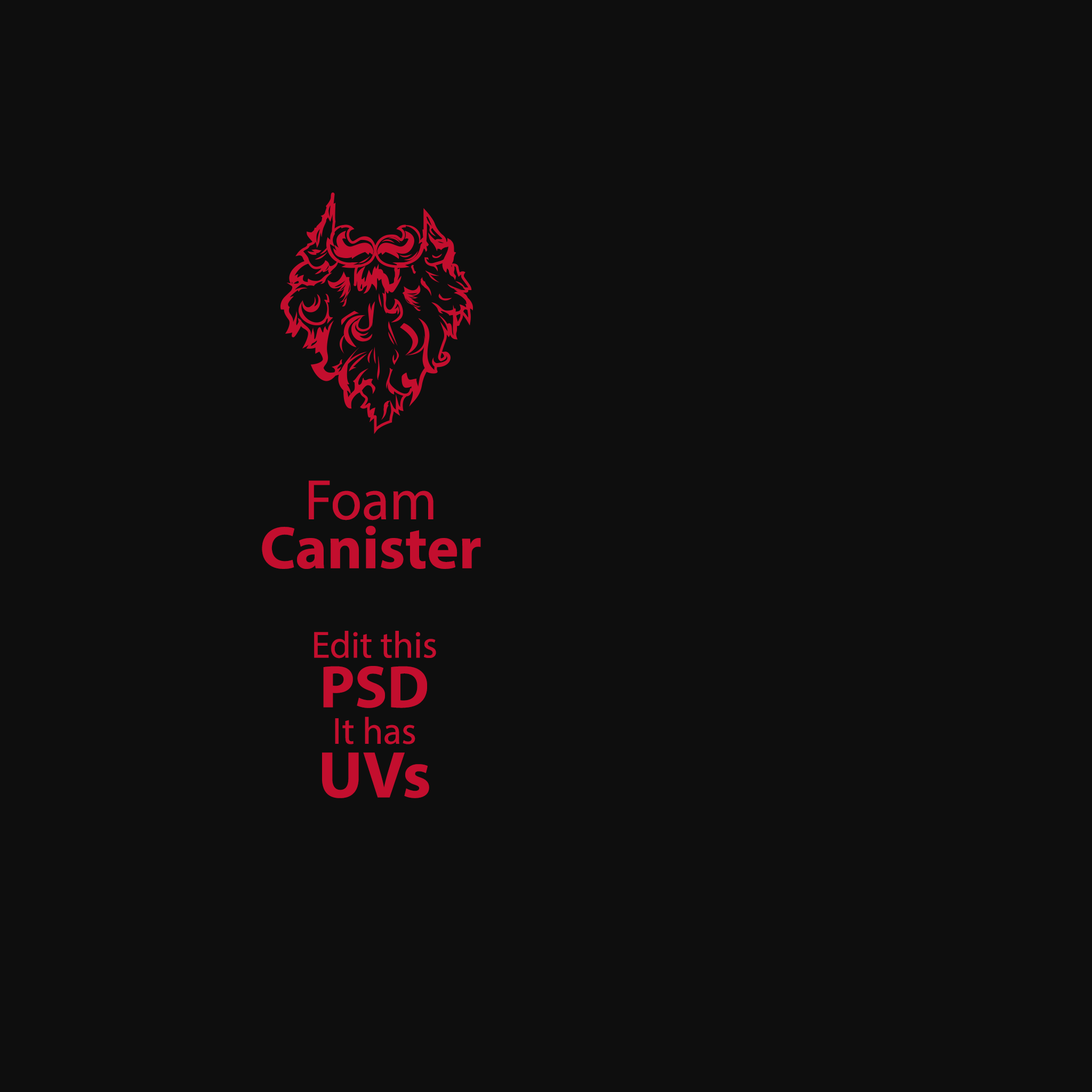
<style>
.page{position:relative;width:1092px;height:1092px;background:#0e0e0e}
.page>*{position:absolute;margin:0}
.t1{font:60.3px/49px "MyriadPro-Bold";color:#c30e2e}
.t2{font:57.2px "MyriadPro-Regular";color:#c30e2e}
.t3{font:37.6px "MyriadPro-Regular";color:#c30e2e}
.t4{font:60.3px/49.7px "MyriadPro-Bold";color:#c30e2e}
.t5{font:37.6px/36.4px "MyriadPro-Regular";color:#c30e2e}
.t6{font:66.2px/53.6px "MyriadPro-Bold";color:#c30e2e}
</style>
<div class="page">
<p class="t1" style="left:262px;top:480px;width:219px;height:89px;text-align:center"><span class="t2">Foam<br></span>Canister</p>
<p class="t3" style="left:314px;top:631px;width:122px;height:167px;text-align:center">Edit this<br><span class="t4">PSD<br></span><span class="t5">It has<br></span><span class="t6">UVs</span></p>
</div>
